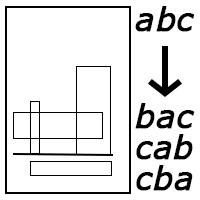
<style>
.page{position:relative;width:200px;height:200px;background:#ffffff}
.page>*{position:absolute;margin:0}
.t1{font:32px "Verdana-Italic";color:#000000;font-weight:bold}
</style>
<div class="page">
<p class="t1" style="left:135px;top:6px;width:60px;height:26px">abc</p>
<p class="t1" style="left:135px;top:103px;width:60px;height:26px">bac</p>
<p class="t1" style="left:136px;top:134px;width:57px;height:26px">cab</p>
<p class="t1" style="left:136px;top:165px;width:57px;height:26px">cba</p>
</div>
